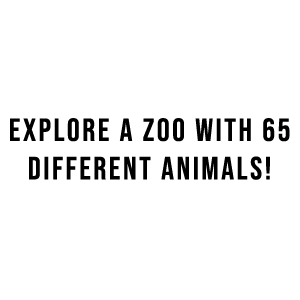
<style>
.page{position:relative;width:300px;height:300px;background:#ffffff}
.page>*{position:absolute;margin:0}
.t1{font:32px "BebasNeue-Regular";letter-spacing:0.08em;color:#000000}
</style>
<div class="page">
<p class="t1" style="left:10px;top:118px;width:280px;height:62px;text-align:center">EXPLORE A ZOO WITH 65 DIFFERENT ANIMALS!</p>
</div>
